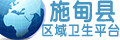
<style>
.page{position:relative;width:120px;height:40px;background:#ffffff}
.page>*{position:absolute;margin:0}
.t1{font:24px "FZY4JW--GB1-0";letter-spacing:0.05em;color:#4596c2;scale:0.9 1}
.t2{font:14px "FZY4JW--GB1-0";letter-spacing:0.05em;color:#4596c2;scale:0.9 1}
</style>
<div class="page">
<p class="t1" style="left:50px;top:0px;width:65px;height:23px">施甸县</p>
<p class="t2" style="left:42px;top:23px;width:78px;height:14px">区域卫生平台</p>
</div>
